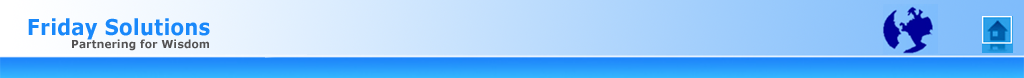
<style>
.page{position:relative;width:1024px;height:78px}
.page>*{position:absolute;margin:0}
.t1{font:22px "Verdana-Bold";letter-spacing:0.01em;color:#1988fa;scale:0.9 1}
.t2{font:11px "Verdana-Bold";letter-spacing:0.025em;color:#535253;scale:0.95 1}
</style>
<div class="page">
<p class="t1" style="left:28px;top:18px;width:182px;height:22px">Friday Solutions</p>
<p class="t2" style="left:72px;top:39px;width:137px;height:12px">Partnering for Wisdom</p>
</div>
